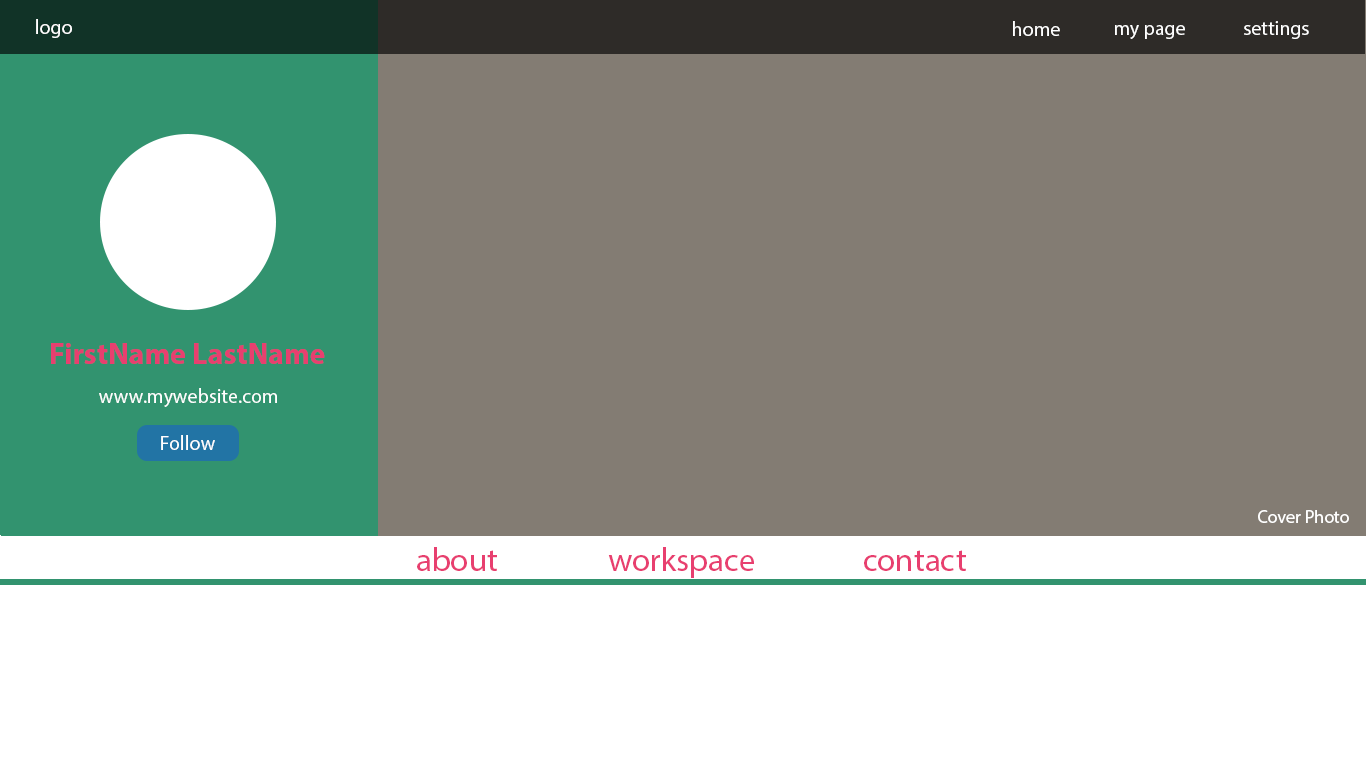
<style>
.page{position:relative;width:1366px;height:768px;background:#837c73}
.page>*{position:absolute;margin:0}
.t1{font:20px "MyriadPro-Regular";color:#ffffff}
.t2{font:30px "MyriadPro-Bold";color:#e83f6f}
.t3{font:18px "MyriadPro-Regular";color:#ffffff}
.t4{font:33px "MyriadPro-Regular";color:#e83f6f}
</style>
<div class="page">
<p class="t1" style="left:36px;top:19px;width:36px;height:19px">logo</p>
<p class="t1" style="left:1013px;top:21px;width:47px;height:15px">home</p>
<p class="t1" style="left:1115px;top:25px;width:70px;height:14px">my page</p>
<p class="t1" style="left:1244px;top:21px;width:65px;height:18px">settings</p>
<p class="t2" style="left:51px;top:343px;width:274px;height:21px">FirstName LastName</p>
<p class="t1" style="left:99px;top:388px;width:178px;height:19px">www.mywebsite.com</p>
<p class="t1" style="left:161px;top:435px;width:54px;height:15px">Follow</p>
<p class="t3" style="left:1258px;top:510px;width:91px;height:13px">Cover Photo</p>
<p class="t4" style="left:417px;top:547px;width:80px;height:24px">about</p>
<p class="t4" style="left:608px;top:547px;width:146px;height:31px">workspace</p>
<p class="t4" style="left:864px;top:550px;width:102px;height:21px">contact</p>
</div>
